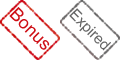
<style>
.page{position:relative;width:120px;height:60px;background:#ffffff}
.page>*{position:absolute;margin:0}
.t1{font:18px "ArialMT";color:#ce1017}
.t2{font:15px "ArialMT";color:#666666}
</style>
<div class="page">
<p class="t1" style="left:4px;top:4px;width:51px;height:51px;rotate:45deg">Bonus</p>
<p class="t2" style="left:65px;top:6px;width:48px;height:49px;rotate:45deg">Expired</p>
</div>
